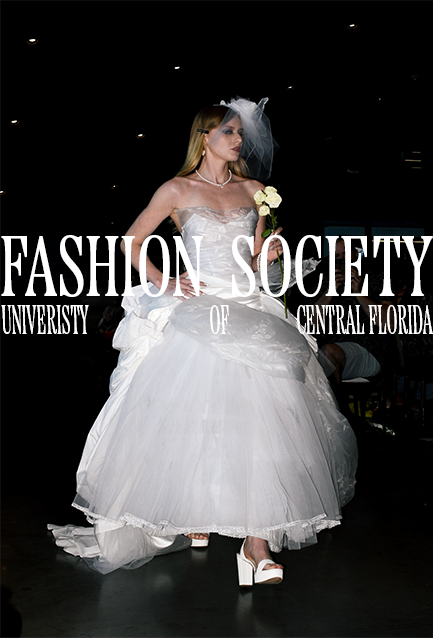
<style>
.page{position:relative;width:433px;height:638px;background:#000000}
.page>*{position:absolute;margin:0}
.t1{font:86.2px "EtnaXCondensed-Regular";color:#ffffff}
.t2{font:40.6px "EtnaXCondensed-Regular";color:#ffffff;scale:0.66 1}
</style>
<div class="page">
<p class="t1" style="left:1px;top:235px;width:432px;height:62px">FASHION  SOCIETY</p>
<p class="t2" style="left:1px;top:305px;width:88px;height:29px">UNIVERISTY</p>
<p class="t2" style="left:210px;top:305px;width:19px;height:29px">OF</p>
<p class="t2" style="left:297px;top:305px;width:136px;height:29px">CENTRAL FLORIDA</p>
</div>
